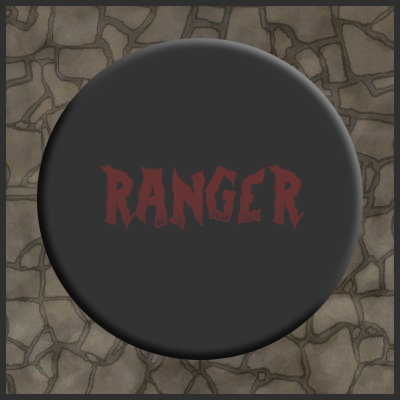
<style>
.page{position:relative;width:400px;height:400px;background:#333333}
.page>*{position:absolute;margin:0}
.t1{font:50.2px "CurseoftheZombie";color:#663333}
</style>
<div class="page">
<p class="t1" style="left:100px;top:164px;width:204px;height:66px">RANGER</p>
</div>
